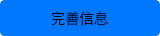
<style>
.page{position:relative;width:160px;height:36px;background:#0077ff}
.page>*{position:absolute;margin:0}
.t1{font:15px "STXihei";letter-spacing:-0.045em;color:#000000}
</style>
<div class="page">
<p class="t1" style="left:51px;top:11px;width:57px;height:15px">完善信息</p>
</div>
